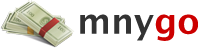
<style>
.page{position:relative;width:200px;height:49px;background:#ffffff}
.page>*{position:absolute;margin:0}
.t1{font:35px "LucidaGrande-Bold";color:#333333}
.t2{font:35px "LucidaGrande-Bold";color:#cc0000}
</style>
<div class="page">
<p class="t1" style="left:80px;top:14px;width:118px;height:27px">mny<span class="t2">go</span></p>
</div>
